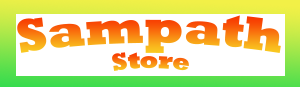
<style>
.page{position:relative;width:300px;height:87px;background:#ffffff}
.page>*{position:absolute;margin:0}
.t1{font:48px "Rockwell-ExtraBold"}
.t2{font:24px "Rockwell-ExtraBold"}
</style>
<div class="page">
<p class="t1" style="left:17px;top:15px;width:264px;height:38px">Sampath</p>
<p class="t2" style="left:112px;top:52px;width:77px;height:19px">Store</p>
</div>
